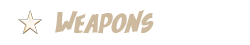
<style>
.page{position:relative;width:250px;height:45px;background:#ffffff}
.page>*{position:absolute;margin:0}
.t1{font:30px "HoustonComicsPersonalUse";color:#cdb99d}
</style>
<div class="page">
<p class="t1" style="left:55px;top:10px;width:99px;height:24px">WEAPONS</p>
</div>
